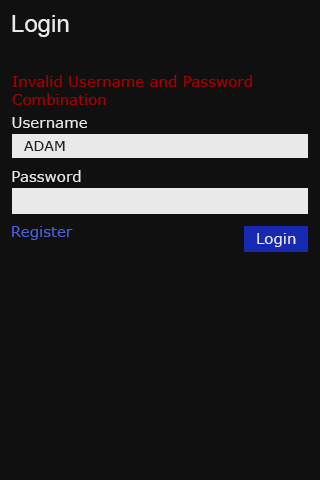
<style>
.page{position:relative;width:320px;height:480px;background:#101010}
.page>*{position:absolute;margin:0}
.t1{font:24px "ArialMT";color:#e9e9e9}
.t2{font:15px "Verdana";color:#a40000}
.t3{font:15px "Verdana";color:#e9e9e9}
.t4{font:14px "Verdana";color:#222222}
.t5{font:15px "Verdana";color:#4b5cd7}
</style>
<div class="page">
<p class="t1" style="left:12px;top:15px;width:57px;height:22px">Login</p>
<p class="t2" style="left:12px;top:75px;width:240px;height:30px">Invalid Username and Password<br>Combination</p>
<p class="t3" style="left:12px;top:117px;width:75px;height:11px">Username</p>
<p class="t4" style="left:24px;top:141px;width:41px;height:10px">ADAM</p>
<p class="t3" style="left:12px;top:170px;width:69px;height:12px">Password</p>
<p class="t5" style="left:12px;top:226px;width:61px;height:14px">Register</p>
<p class="t3" style="left:257px;top:233px;width:39px;height:14px">Login</p>
</div>
